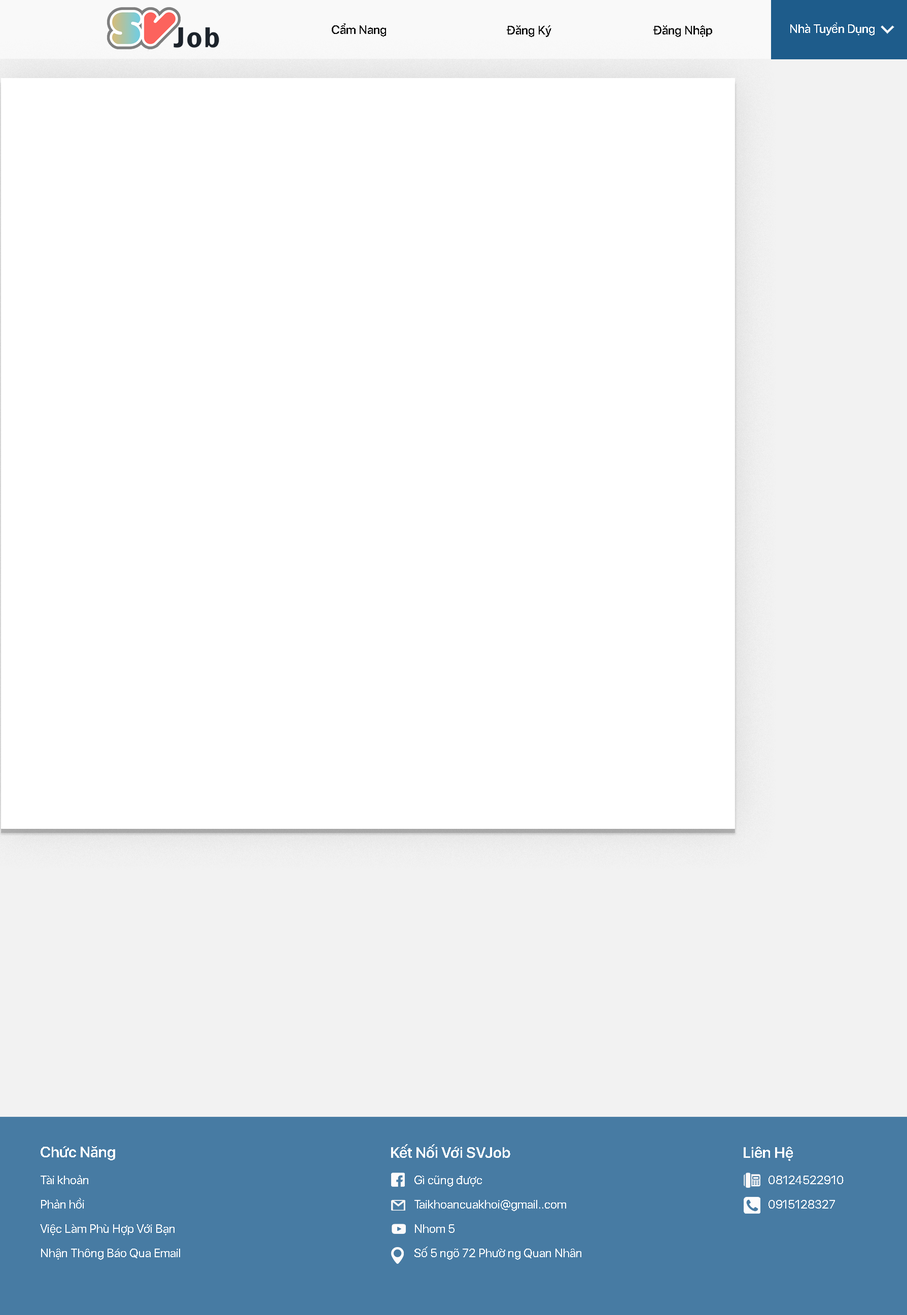
<style>
.page{position:relative;width:907px;height:1315px;background:#ffffff}
.page>*{position:absolute;margin:0}
.t1{font:12.2px "SFProDisplay-Medium";color:#0d0d0d}
.t2{font:15.2px "SFProDisplay-Semibold";color:#ffffff}
.t3{font:12.2px/24.3px "SFProDisplay-Regular";color:#ffffff}
</style>
<div class="page">
<p class="t1" style="left:332px;top:23px;width:54px;height:14px">Cẩm Nang</p>
<p class="t1" style="left:507px;top:25px;width:44px;height:12px">Đăng Ký</p>
<p class="t1" style="left:653px;top:25px;width:59px;height:12px">Đăng Nhập</p>
<p class="t1" style="left:653px;top:25px;width:59px;height:12px">Đăng Nhập</p>
<p class="t2" style="left:391px;top:1144px;width:119px;height:14px">Kết Nối Với SVJob</p>
<p class="t2" style="left:41px;top:1146px;width:74px;height:15px">Chức Năng</p>
<p class="t2" style="left:743px;top:1147px;width:50px;height:14px">Liên Hệ</p>
<p class="t3" style="left:40px;top:1175px;width:140px;height:85px">Tài khoản<br>Phản hồi<br>Việc Làm Phù Hợp Với Bạn<br>Nhận Thông Báo Qua Email</p>
<p class="t3" style="left:414px;top:1176px;width:167px;height:84px">Gì cũng được<br>Taikhoancuakhoi@gmail..com<br>Nhom 5<br>Số 5 ngõ 72 Phườ ng Quan Nhân</p>
<p class="t3" style="left:768px;top:1176px;width:75px;height:33px">08124522910<br>0915128327</p>
</div>
